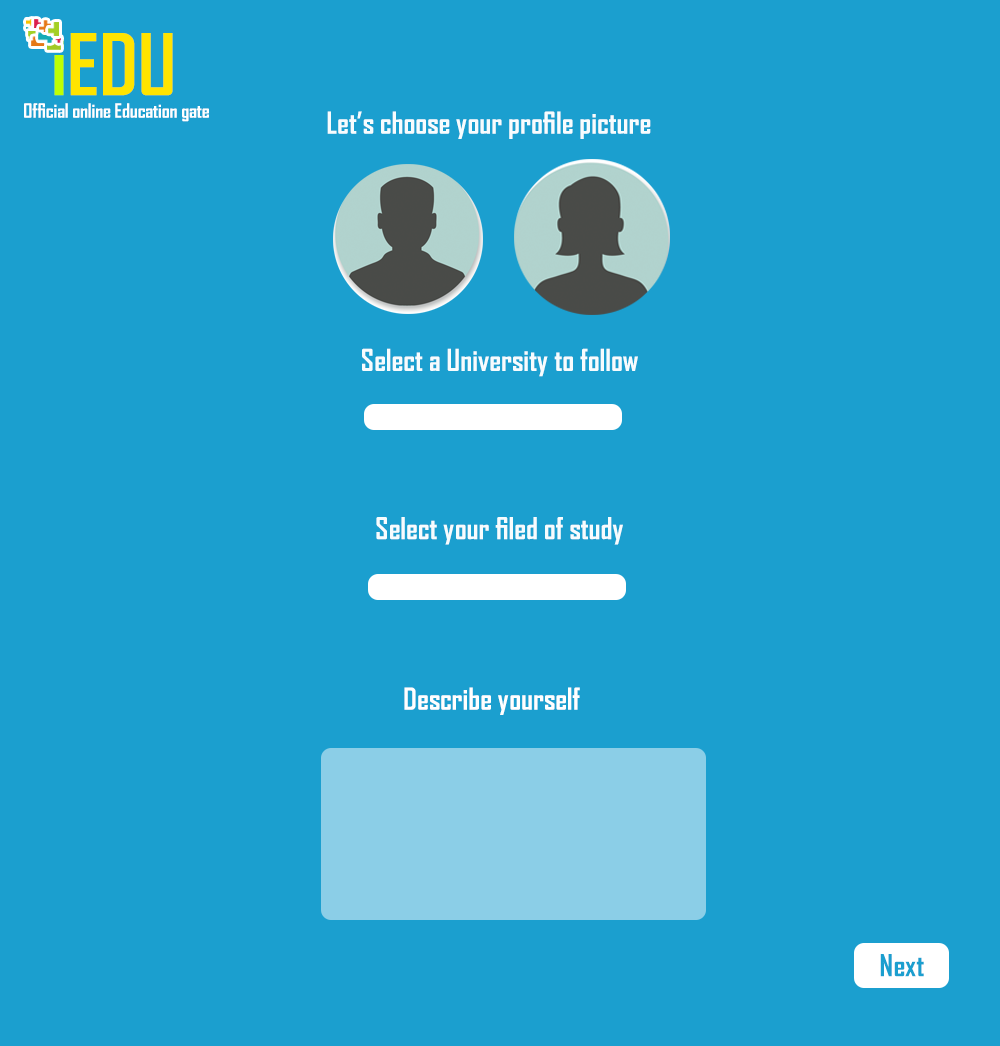
<style>
.page{position:relative;width:1000px;height:1046px;background:#1b9fcf}
.page>*{position:absolute;margin:0}
.t1{font:81.5px "AgencyFB-Bold";color:#ffe400}
.t2{font:81.5px "AgencyFB-Bold";color:#beff03}
.t3{font:18.9px "AgencyFB-Bold";color:#ffffff}
.t4{font:29.2px "AgencyFB-Bold";color:#f7fcfe}
.t5{font:29.2px "AgencyFB-Bold";color:#ffffff}
.t6{font:29.2px "AgencyFB-Bold";color:#1b9fcf}
</style>
<div class="page">
<p class="t1" style="left:54px;top:33px;width:119px;height:63px"><span class="t2">i</span>EDU</p>
<p class="t3" style="left:24px;top:103px;width:185px;height:19px">Official online Education gate</p>
<p class="t4" style="left:327px;top:111px;width:324px;height:28px">Let’s choose your profile picture</p>
<p class="t4" style="left:362px;top:348px;width:276px;height:29px">Select a University to follow</p>
<p class="t4" style="left:376px;top:517px;width:247px;height:28px">Select your filed of study</p>
<p class="t5" style="left:404px;top:687px;width:176px;height:28px">Describe yourself</p>
<p class="t6" style="left:880px;top:954px;width:44px;height:23px">Next</p>
</div>
